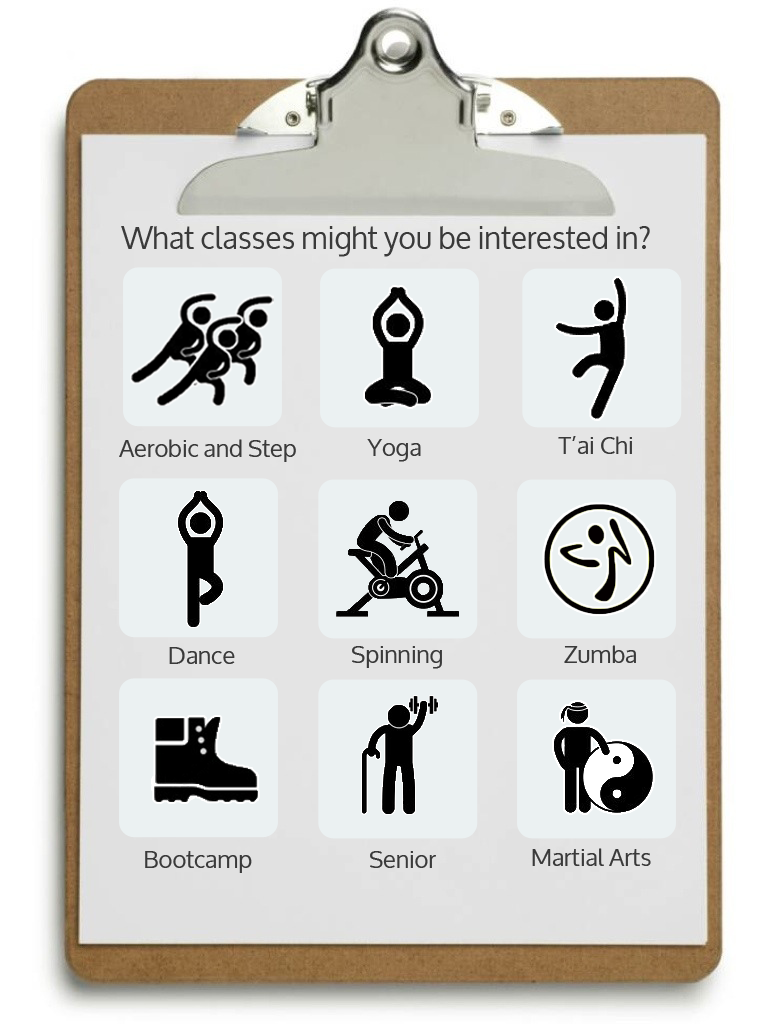
<style>
.page{position:relative;width:768px;height:1024px;background:#ebf1f2}
.page>*{position:absolute;margin:0}
.t1{font:30px "Oxygen";color:#3a3a3a}
.t2{font:24px "Oxygen";color:#3a3a3a}
</style>
<div class="page">
<p class="t1" style="left:121px;top:226px;width:529px;height:31px">What classes might you be interested in?</p>
<p class="t2" style="left:558px;top:436px;width:74px;height:18px">T’ai Chi</p>
<p class="t2" style="left:119px;top:439px;width:177px;height:23px">Aerobic and Step</p>
<p class="t2" style="left:367px;top:439px;width:54px;height:23px">Yoga</p>
<p class="t2" style="left:169px;top:647px;width:66px;height:17px">Dance</p>
<p class="t2" style="left:352px;top:646px;width:90px;height:23px">Spinning</p>
<p class="t2" style="left:564px;top:645px;width:72px;height:18px">Zumba</p>
<p class="t2" style="left:145px;top:851px;width:107px;height:22px">Bootcamp</p>
<p class="t2" style="left:370px;top:851px;width:66px;height:17px">Senior</p>
<p class="t2" style="left:532px;top:848px;width:119px;height:18px">Martial Arts</p>
</div>
